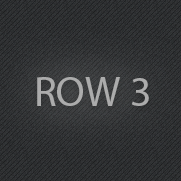
<style>
.page{position:relative;width:181px;height:181px}
.page>*{position:absolute;margin:0}
.t1{font:42px "MyriadPro-Regular";color:#b7b7b7}
</style>
<div class="page">
<p class="t1" style="left:37px;top:77px;width:112px;height:29px;opacity:0.89">ROW 3</p>
</div>
